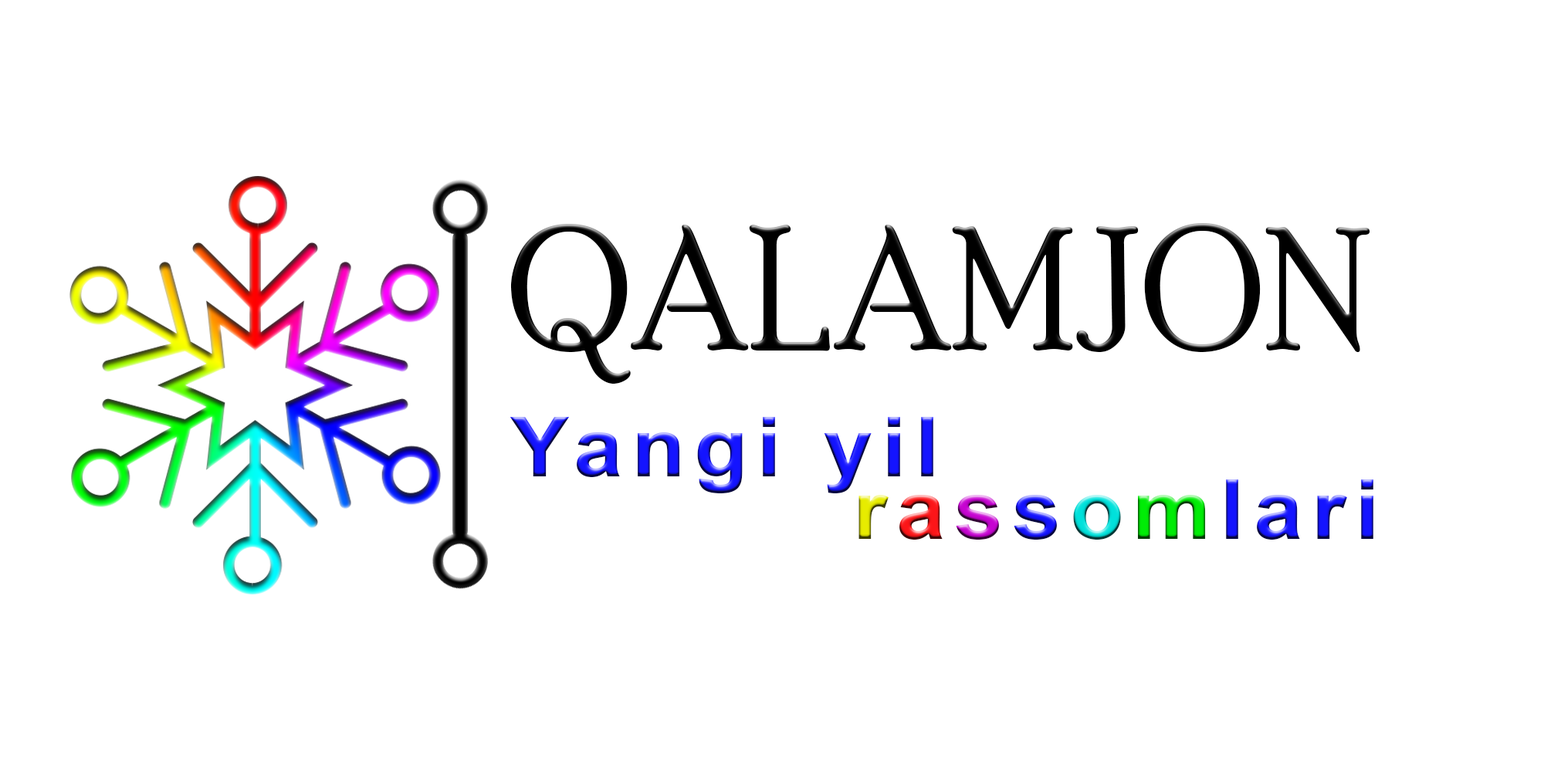
<style>
.page{position:relative;width:1544px;height:772px;background:#ffffff}
.page>*{position:absolute;margin:0}
.t1{font:174.5px "PoorRichard-Regular";letter-spacing:0.02em;color:#000000;scale:0.9 1}
.t2{font:82.8px "Arial-BoldMT";letter-spacing:0.1em;scale:1.07 1}
</style>
<div class="page">
<p class="t1" style="left:510px;top:223px;width:861px;height:161px">QALAMJON</p>
<p class="t2" style="left:510px;top:417px;width:424px;height:76px">Yangi yil</p>
<p class="t2" style="left:859px;top:480px;width:515px;height:60px">rassomlari</p>
</div>
